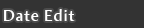
<style>
.page{position:relative;width:144px;height:28px;background:#333333}
.page>*{position:absolute;margin:0}
.t1{font:16px "AmiraParadiso";letter-spacing:0.05em;color:#ffffff}
</style>
<div class="page">
<p class="t1" style="left:4px;top:9px;width:71px;height:12px">Date Edit</p>
</div>
